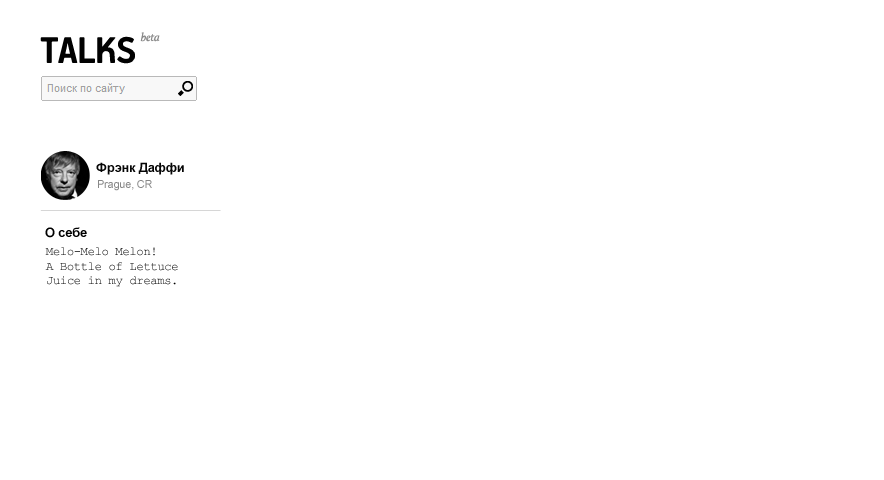
<style>
.page{position:relative;width:884px;height:480px;background:#ffffff}
.page>*{position:absolute;margin:0}
.t1{font:41.5px "PFHandbookPro-Bold";letter-spacing:-0.02em;color:#010101}
.t2{font:11.6px "Calluna-It";letter-spacing:-0.02em;color:#888888}
.t3{font:13px "Arial-BoldMT";letter-spacing:-0.02em;color:#060606}
.t4{font:11px "ArialMT";letter-spacing:-0.02em;color:#888888}
.t5{font:13px "Arial-BoldMT";letter-spacing:-0.02em;color:#000000}
.t6{font:12px "CourierNewPSMT";letter-spacing:-0.02em;color:#000000}
</style>
<div class="page">
<p class="t1" style="left:40px;top:36px;width:95px;height:28px">TALKS</p>
<p class="t2" style="left:140px;top:32px;width:20px;height:10px">beta</p>
<p class="t3" style="left:96px;top:162px;width:88px;height:13px">Фрэнк Даффи</p>
<p class="t4" style="left:98px;top:180px;width:54px;height:11px">Prague, CR</p>
<p class="t5" style="left:45px;top:227px;width:42px;height:11px">О себе</p>
<p class="t6" style="left:45px;top:247px;width:133px;height:40px">Melo-Melo Melon!<br>A Bottle of Lettuce Juice in my dreams.</p>
</div>
